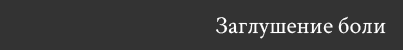
<style>
.page{position:relative;width:403px;height:50px;background:#333333}
.page>*{position:absolute;margin:0}
.t1{font:24px "CrimsonText-Regular";color:#ffffff}
</style>
<div class="page">
<p class="t1" style="left:216px;top:16px;width:170px;height:23px">Заглушение боли</p>
</div>
